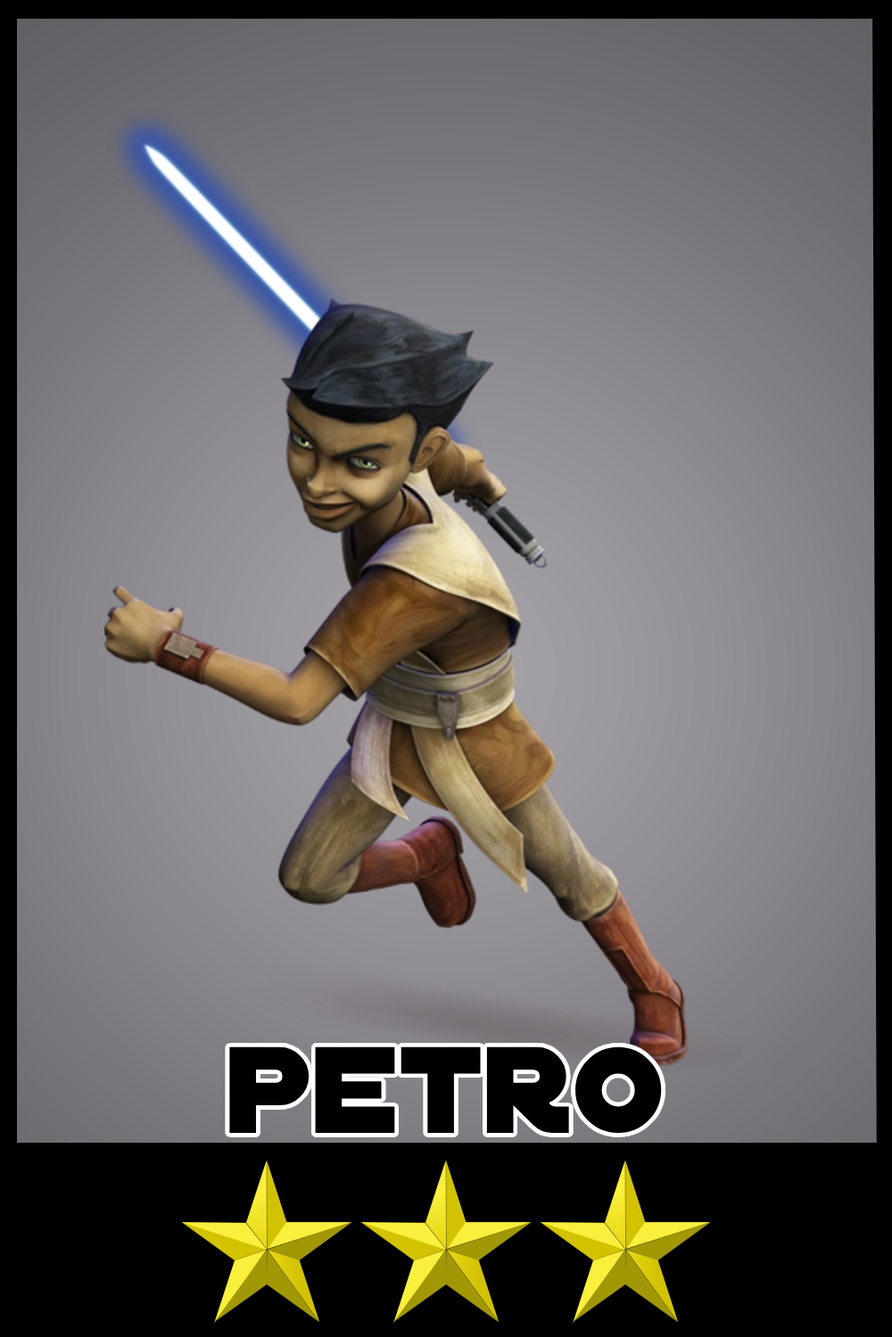
<style>
.page{position:relative;width:892px;height:1337px}
.page>*{position:absolute;margin:0}
.t1{font:131.9px "DistantGalaxy";color:#000000}
</style>
<div class="page">
<p class="t1" style="left:229px;top:1047px;width:433px;height:86px">petro</p>
</div>
